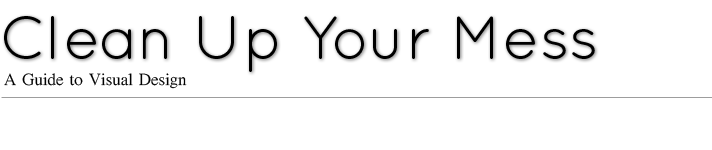
<style>
.page{position:relative;width:712px;height:150px;background:#ffffff}
.page>*{position:absolute;margin:0}
.t1{font:61px "QuicksandBook-Regular";color:#000000}
.t2{font:18px "LiSungLight";color:#000000}
</style>
<div class="page">
<p class="t1" style="left:4px;top:16px;width:591px;height:56px">Clean Up Your Mess</p>
<p class="t2" style="left:4px;top:73px;width:183px;height:16px">A Guide to Visual Design</p>
</div>
